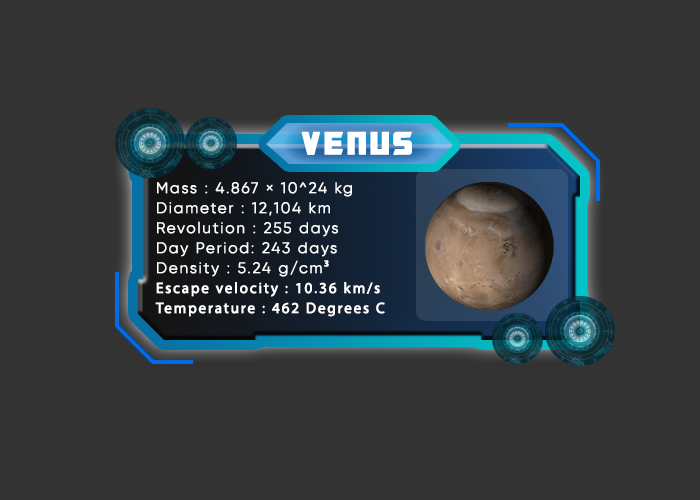
<style>
.page{position:relative;width:700px;height:500px;background:#333333}
.page>*{position:absolute;margin:0}
.t1{font:35px "TransformersMovie";letter-spacing:0.1em;color:#ffffff;font-weight:bold}
.t2{font:15px/20px "Gilroy-Light";letter-spacing:0.1em;color:#ffffff;font-weight:bold}
.t3{font:15px/20px "MyriadPro-Regular";letter-spacing:0.1em;color:#ffffff;font-weight:bold}
</style>
<div class="page">
<p class="t1" style="left:301px;top:131px;width:111px;height:24px">VENUS</p>
<p class="t2" style="left:155px;top:182px;width:230px;height:135px">Mass : 4.867 × 10^24 kg<br>Diameter : 12,104 km<br>Revolution : 255 days<br>Day Period: 243 days<br>Density : 5.24 g/cm<span class="t3">³<br>Escape velocity : 10.36 km/s<br>Temperature : 462 Degrees C</span></p>
</div>
